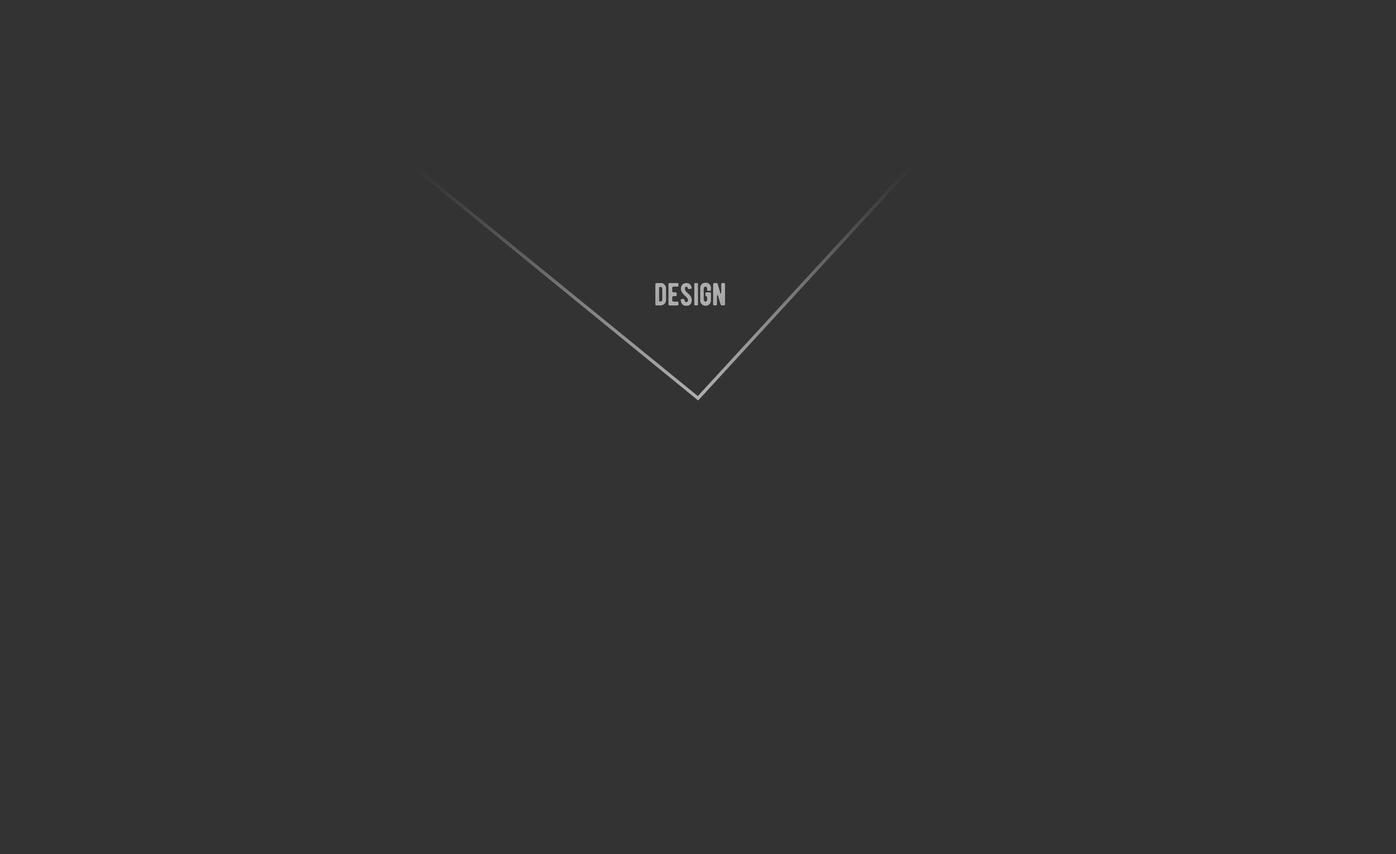
<style>
.page{position:relative;width:1396px;height:854px;background:#333333}
.page>*{position:absolute;margin:0}
.t1{font:31.9px "BERNIERDISTRESSED";color:#aeaeae}
</style>
<div class="page">
<p class="t1" style="left:655px;top:283px;width:70px;height:23px">design</p>
</div>
